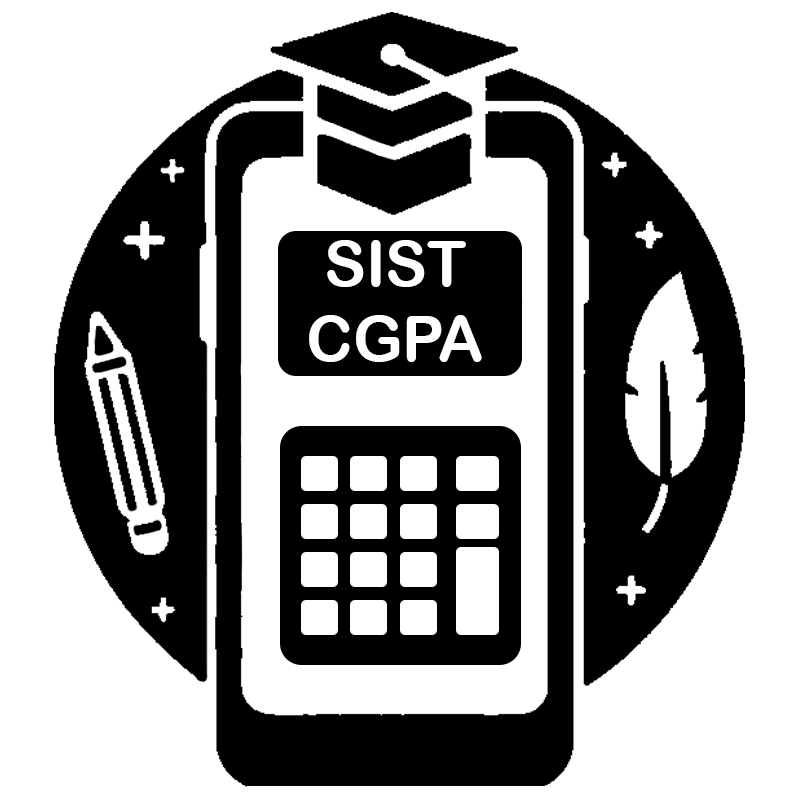
<style>
.page{position:relative;width:800px;height:800px;background:#ffffff}
.page>*{position:absolute;margin:0}
.t1{font:62.5px "ArialRoundedMTBold";color:#fefefe}
</style>
<div class="page">
<p class="t1" style="left:309px;top:240px;width:173px;height:122px;text-align:center">SIST<br>CGPA</p>
</div>
